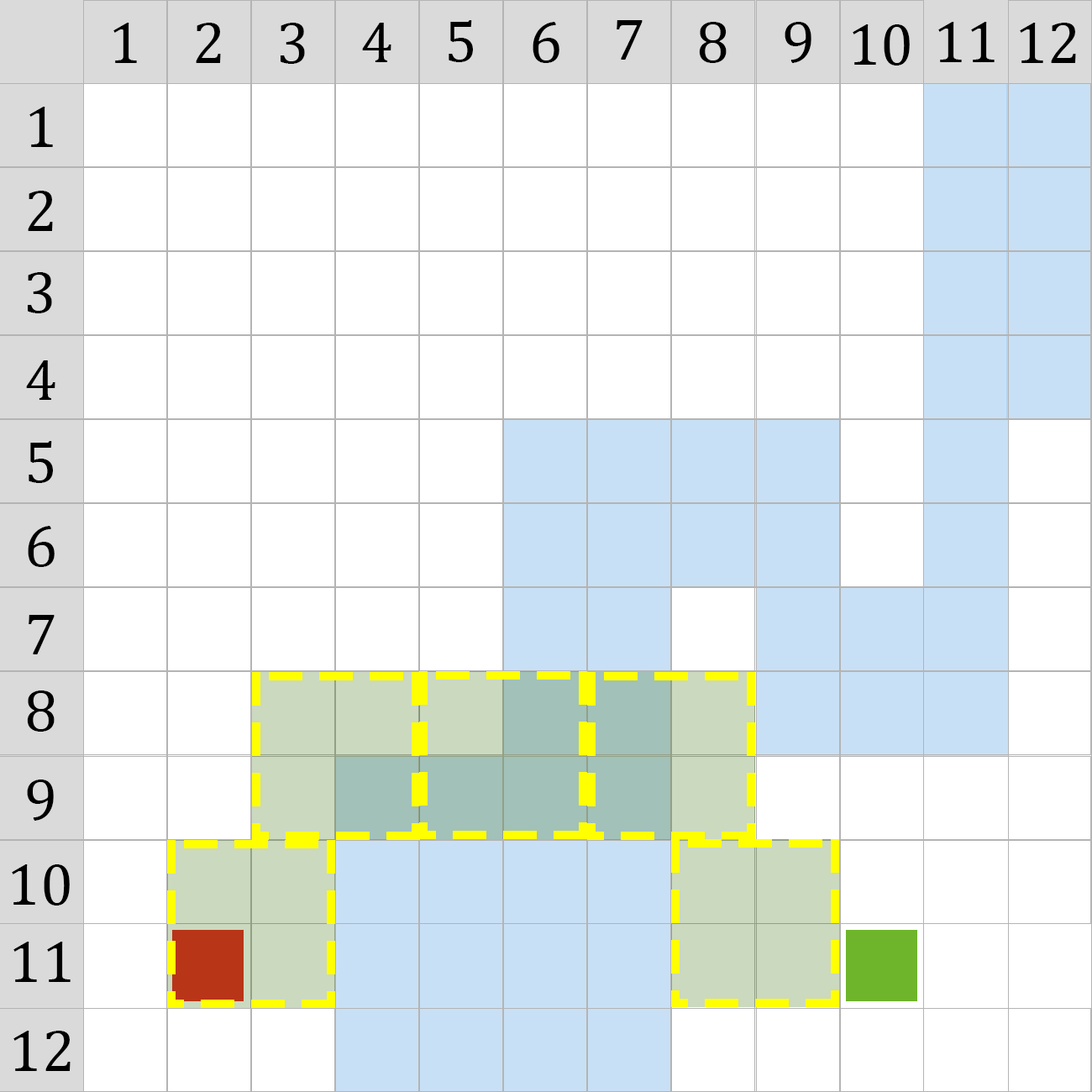
<style>
.page{position:relative;width:1092px;height:1092px;background:#ffffff}
.page>*{position:absolute;margin:0}
.t1{font:59.3px "Cambria";color:#000000}
</style>
<div class="page">
<p class="t1" style="left:113px;top:23px;width:24px;height:40px">1</p>
<p class="t1" style="left:196px;top:23px;width:25px;height:40px">2</p>
<p class="t1" style="left:281px;top:23px;width:24px;height:41px">3</p>
<p class="t1" style="left:362px;top:23px;width:29px;height:39px">4</p>
<p class="t1" style="left:449px;top:20px;width:24px;height:42px">5</p>
<p class="t1" style="left:533px;top:22px;width:26px;height:41px">6</p>
<p class="t1" style="left:617px;top:20px;width:26px;height:40px">7</p>
<p class="t1" style="left:699px;top:22px;width:28px;height:41px">8</p>
<p class="t1" style="left:785px;top:22px;width:26px;height:41px">9</p>
<p class="t1" style="left:853px;top:24px;width:57px;height:42px">10</p>
<p class="t1" style="left:938px;top:22px;width:57px;height:40px">11</p>
<p class="t1" style="left:1020px;top:23px;width:56px;height:40px">12</p>
<p class="t1" style="left:29px;top:107px;width:24px;height:40px">1</p>
<p class="t1" style="left:28px;top:191px;width:25px;height:40px">2</p>
<p class="t1" style="left:28px;top:272px;width:24px;height:41px">3</p>
<p class="t1" style="left:26px;top:360px;width:29px;height:40px">4</p>
<p class="t1" style="left:29px;top:441px;width:24px;height:42px">5</p>
<p class="t1" style="left:28px;top:526px;width:27px;height:41px">6</p>
<p class="t1" style="left:29px;top:615px;width:26px;height:39px">7</p>
<p class="t1" style="left:27px;top:690px;width:28px;height:42px">8</p>
<p class="t1" style="left:27px;top:780px;width:27px;height:41px">9</p>
<p class="t1" style="left:12px;top:864px;width:58px;height:42px">10</p>
<p class="t1" style="left:13px;top:942px;width:58px;height:40px">11</p>
<p class="t1" style="left:13px;top:1031px;width:58px;height:40px">12</p>
</div>
